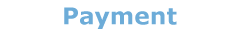
<style>
.page{position:relative;width:239px;height:38px;background:#ffffff}
.page>*{position:absolute;margin:0}
.t1{font:23px "Verdana-Bold";color:#6dacd8}
</style>
<div class="page">
<p class="t1" style="left:64px;top:7px;width:113px;height:22px">Payment</p>
</div>
